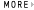
<style>
.page{position:relative;width:34px;height:10px;background:#ffffff}
.page>*{position:absolute;margin:0}
.t1{font:8.9px "HCRDotum";letter-spacing:0.26em;color:#000000;scale:0.76 1}
</style>
<div class="page">
<p class="t1" style="left:4px;top:0px;width:24px;height:8px">MORE</p>
</div>
